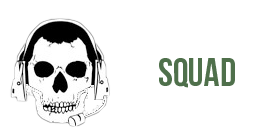
<style>
.page{position:relative;width:256px;height:128px;background:#ffffff}
.page>*{position:absolute;margin:0}
.t1{font:38.9px "BebasNeueBold";color:#4f704b}
.t2{font:38.9px "BebasNeueBold";color:#ffffff}
</style>
<div class="page">
<p class="t1" style="left:116px;top:58px;width:119px;height:30px"><span class="t2">WZ </span>Squad</p>
</div>
